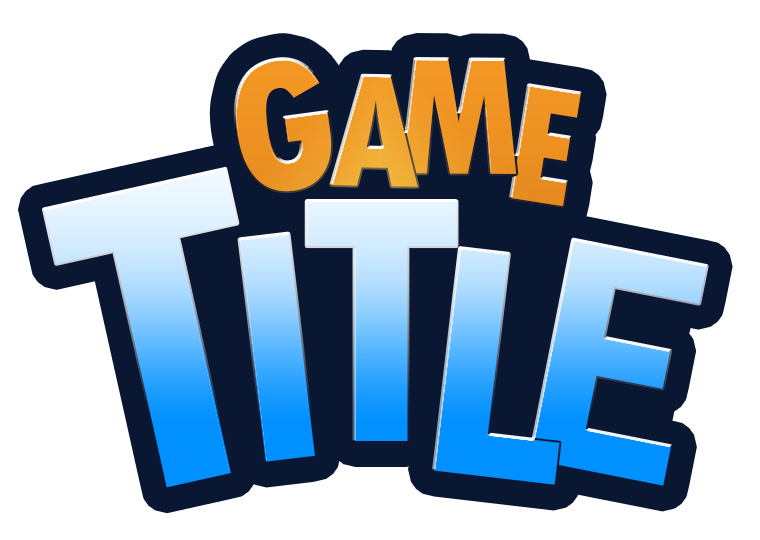
<style>
.page{position:relative;width:760px;height:540px;background:#ffffff}
.page>*{position:absolute;margin:0}
.t1{font:192.5px "TwCenMT-CondensedExtraBold";letter-spacing:-0.06em;color:#f29724}
.t2{font:175px "TwCenMT-CondensedExtraBold";letter-spacing:-0.06em;color:#f29724}
.t3{font:168.5px "TwCenMT-CondensedExtraBold";letter-spacing:-0.06em;color:#f29724}
.t4{font:447.1px "FranklinGothic-DemiCond";letter-spacing:-0.06em}
.t5{font:360.4px "FranklinGothic-DemiCond";letter-spacing:-0.06em}
.t6{font:335.7px "FranklinGothic-DemiCond";letter-spacing:-0.06em}
</style>
<div class="page">
<p class="t1" style="left:235px;top:59px;width:97px;height:133px;rotate:-8deg">G</p>
<p class="t2" style="left:402px;top:59px;width:115px;height:115px">M</p>
<p class="t3" style="left:331px;top:75px;width:87px;height:112px;rotate:1deg">A</p>
<p class="t2" style="left:511px;top:85px;width:70px;height:122px;rotate:9deg">E</p>
<p class="t4" style="left:43px;top:168px;width:195px;height:320px;rotate:-13deg">T</p>
<p class="t5" style="left:306px;top:201px;width:151px;height:240px">T</p>
<p class="t6" style="left:239px;top:233px;width:76px;height:229px;rotate:-7deg">I</p>
<p class="t6" style="left:529px;top:239px;width:178px;height:247px;rotate:11deg">E</p>
<p class="t6" style="left:434px;top:248px;width:126px;height:237px;rotate:7deg">L</p>
</div>
